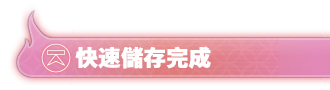
<style>
.page{position:relative;width:330px;height:90px;background:#ffffff}
.page>*{position:absolute;margin:0}
.t1{font:22px "SourceHanSansCN-Heavy";color:#ffffff;font-weight:bold}
</style>
<div class="page">
<p class="t1" style="left:75px;top:46px;width:136px;height:23px">快速儲存完成</p>
</div>
